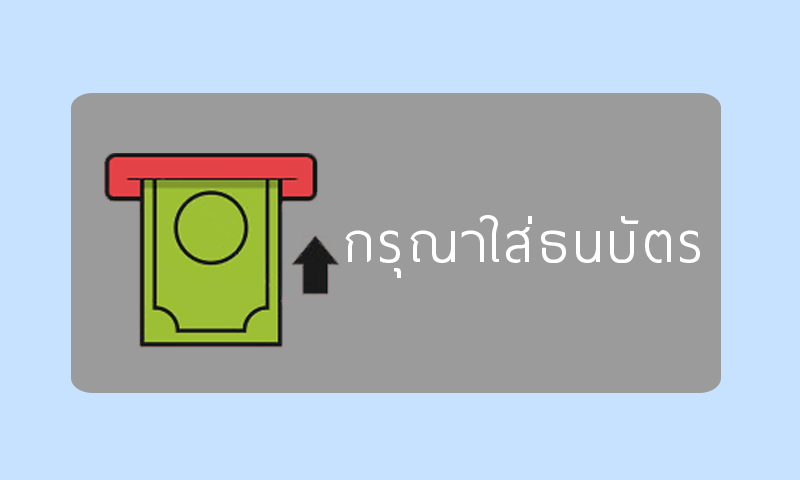
<style>
.page{position:relative;width:800px;height:480px;background:#c6e2ff}
.page>*{position:absolute;margin:0}
.t1{font:72px "ThaiSansLite";letter-spacing:0.03em;color:#ffffff}
</style>
<div class="page">
<p class="t1" style="left:345px;top:215px;width:355px;height:63px">กรุณาใส่ธนบัตร</p>
</div>
